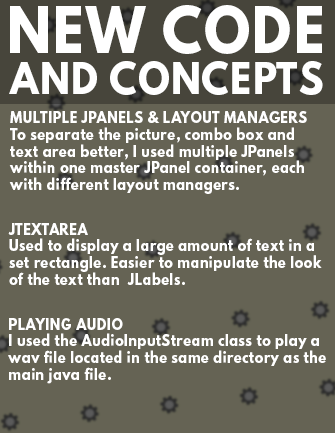
<style>
.page{position:relative;width:335px;height:433px;background:#656354}
.page>*{position:absolute;margin:0}
.t1{font:56.9px "LeagueSpartan-Bold";letter-spacing:0.04em;color:#ffffff;scale:0.93 1}
.t2{font:38.9px "LeagueSpartan-Bold";letter-spacing:0.04em;color:#ffffff;scale:0.93 1}
.t3{font:13.9px "LeagueSpartan-Bold";letter-spacing:0.04em;color:#ffffff;scale:0.93 1}
</style>
<div class="page">
<p class="t1" style="left:10px;top:5px;width:312px;height:49px">NEW CODE</p>
<p class="t2" style="left:9px;top:61px;width:314px;height:34px">AND CONCEPTS</p>
<p class="t3" style="left:9px;top:111px;width:298px;height:83px">MULTIPLE JPANELS &amp; LAYOUT MANAGERS<br>To separate the picture, combo box and<br>text area better, I used multiple JPanels<br>within one master JPanel container, each<br>with different layout managers.</p>
<p class="t3" style="left:8px;top:223px;width:314px;height:62px">JTEXTAREA<br>Used to display a large amount of text in a<br>set rectangle. Easier to manipulate the look<br>of the text than  JLabels.</p>
<p class="t3" style="left:8px;top:318px;width:318px;height:66px">PLAYING AUDIO<br>I used the AudioInputStream class to play a<br>wav file located in the same directory as the<br>main java file.</p>
</div>
